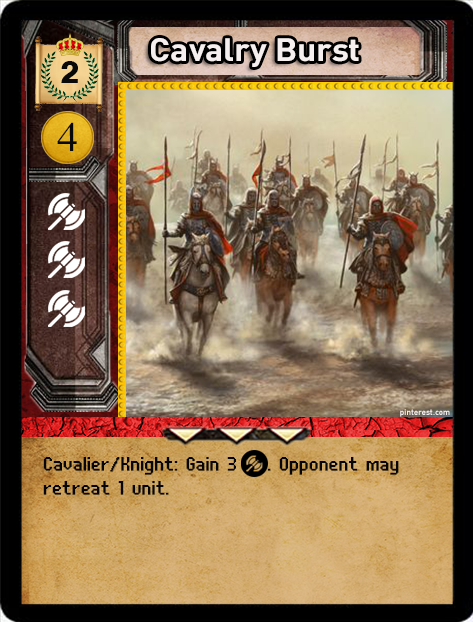
<style>
.page{position:relative;width:473px;height:622px}
.page>*{position:absolute;margin:0}
.t1{font:32px "DIN-Bold";color:#f6eff0;scale:1.06 1}
.t2{font:32px "Swiss721BT-Heavy";color:#090909}
.t3{font:40px "SimplifiedArabic";color:#090909;scale:1.05 1}
.t4{font:8px "DIN-Bold";color:#f6eff0}
.t5{font:24px "UNDA-BitmapFine";letter-spacing:0.01em;color:#060606;font-weight:bold}
</style>
<div class="page">
<p class="t1" style="left:151px;top:38px;width:208px;height:29px">Cavalry Burst</p>
<p class="t2" style="left:61px;top:61px;width:17px;height:22px">2</p>
<p class="t3" style="left:57px;top:122px;width:20px;height:29px">4</p>
<p class="t4" style="left:400px;top:409px;width:50px;height:8px">pinterest.com</p>
<p class="t5" style="left:43px;top:457px;width:356px;height:38px">Cavalier/Knight: Gain 3    . Opponent may retreat 1 unit.</p>
</div>
